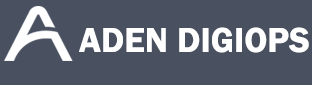
<style>
.page{position:relative;width:312px;height:85px;background:#495060}
.page>*{position:absolute;margin:0}
.t1{font:36px "FranklinGothic-Demi";color:#ffffff}
</style>
<div class="page">
<p class="t1" style="left:79px;top:27px;width:230px;height:26px">ADEN DIGIOPS</p>
</div>
